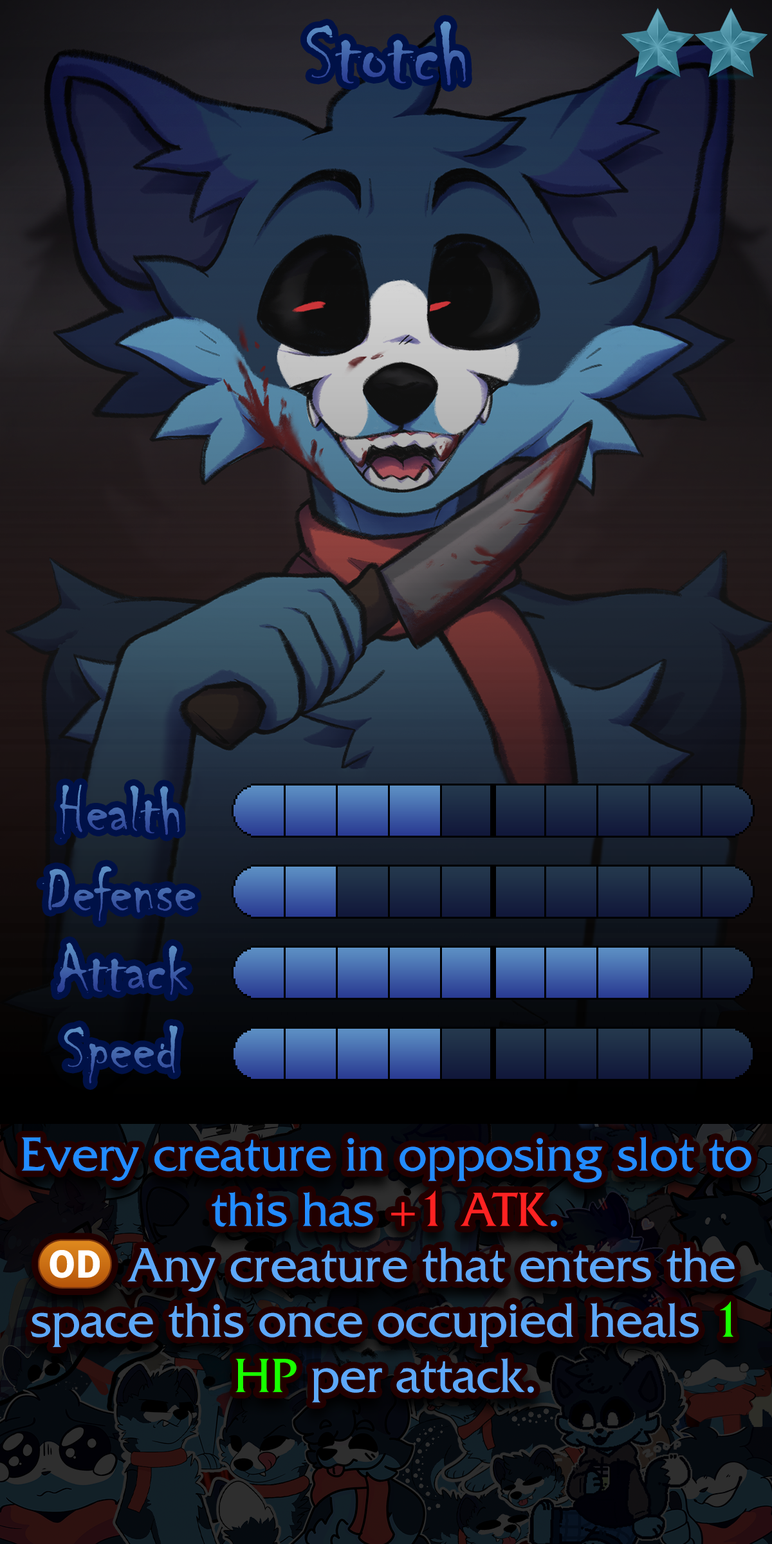
<style>
.page{position:relative;width:772px;height:1544px}
.page>*{position:absolute;margin:0}
.t1{font:152.5px "Chiller-Regular"}
.t2{font:115.8px "Chiller-Regular"}
.t3{font:115.8px "Chiller-Regular";color:#4162a9}
.t4{font:115.8px "Chiller-Regular";color:#4568ac}
.t5{font:86.2px/55.3px "FrizQuadrataStd";color:#5da8f9}
.t6{font:86.2px/55.3px "FrizQuadrataStd";color:#228cff}
.t7{font:86.2px/55.3px "FrizQuadrataStd";color:#ff2222}
.t8{font:86.2px/55.3px "stoogedings-Regular";color:#5da8f9}
.t9{font:86.2px/55.3px "FrizQuadrataStd";color:#18ff00}
</style>
<div class="page">
<p class="t1" style="left:307px;top:21px;width:159px;height:65px">Stotch</p>
<p class="t2" style="left:60px;top:784px;width:120px;height:56px">Health</p>
<p class="t3" style="left:42px;top:866px;width:154px;height:55px">Defense</p>
<p class="t2" style="left:57px;top:943px;width:130px;height:52px">Attack</p>
<p class="t4" style="left:64px;top:1026px;width:114px;height:58px">Speed</p>
<p class="t5" style="left:21px;top:1136px;width:731px;height:267px;text-align:center"><span class="t6">Every creature in opposing slot to this has </span><span class="t7">+1 ATK</span><span class="t6">.<br></span><span class="t8">(OD)</span> Any creature that enters the space this once occupied heals <span class="t9">1 HP</span> per attack.</p>
</div>
